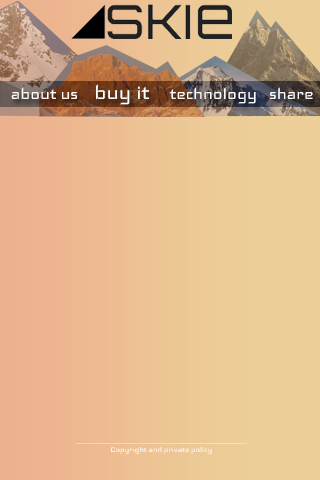
<style>
.page{position:relative;width:320px;height:480px}
.page>*{position:absolute;margin:0}
.t1{font:20px "Iceland-Regular";color:#ffffff}
.t2{font:25px "Iceland-Regular";color:#ffffff}
.t3{font:9.2px "Iceland-Regular";color:#ffffff}
</style>
<div class="page">
<p class="t1" style="left:11px;top:84px;width:302px;height:21px">about us    <span class="t2">buy it</span>     technology   share</p>
<p class="t3" style="left:111px;top:446px;width:101px;height:8px">Copyright and private policy</p>
</div>
